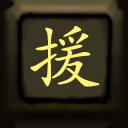
<style>
.page{position:relative;width:128px;height:128px;background:#3a3523}
.page>*{position:absolute;margin:0}
.t1{font:72px "STKaiti";color:#fff579}
</style>
<div class="page">
<p class="t1" style="left:30px;top:26px;width:70px;height:61px">援</p>
</div>
